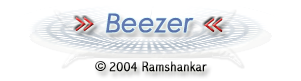
<style>
.page{position:relative;width:301px;height:81px;background:#ffffff}
.page>*{position:absolute;margin:0}
.t1{font:24px "CourierNewPS-BoldMT";letter-spacing:-0.12em;scale:0.75 1}
.t2{font:25.4px "CenturyGothic-Italic";color:#5871ab;font-weight:bold}
.t3{font:14.1px "AbadiMT-CondensedLight";letter-spacing:0.02em;font-weight:bold}
.t4{font:14.1px "Impact";letter-spacing:0.02em}
</style>
<div class="page">
<p class="t1" style="left:75px;top:17px;width:19px;height:14px">&gt;&gt;</p>
<p class="t2" style="left:106px;top:13px;width:88px;height:20px">Beezer</p>
<p class="t1" style="left:204px;top:18px;width:19px;height:14px;rotate:180deg">&gt;&gt;</p>
<p class="t3" style="left:95px;top:61px;width:112px;height:11px"><span class="t4">© </span>2004 Ramshankar</p>
</div>
